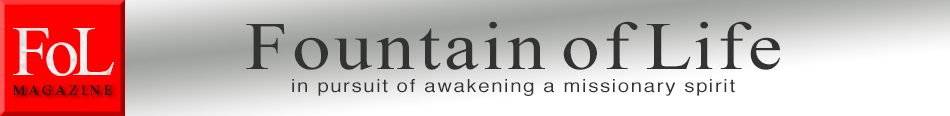
<style>
.page{position:relative;width:950px;height:116px}
.page>*{position:absolute;margin:0}
.t1{font:68px "TimesNewRomanPSMT";letter-spacing:-0.1em;color:#333333;scale:1.13 1}
.t2{font:18px "Helvetica";letter-spacing:-0.1em;color:#333333;scale:1.13 1}
</style>
<div class="page">
<p class="t1" style="left:246px;top:21px;width:534px;height:49px">F o u n t a i n  o f  L i f e</p>
<p class="t2" style="left:292px;top:79px;width:443px;height:17px">i n   p u r s u i t   o f   a w a k e n i n g   a   m i s s i o n a r y   s p i r i t</p>
</div>
